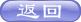
<style>
.page{position:relative;width:81px;height:22px}
.page>*{position:absolute;margin:0}
.t1{font:24px "LiSu";color:#fdfcfc}
</style>
<div class="page">
<p class="t1" style="left:17px;top:4px;width:44px;height:15px">返回</p>
</div>
